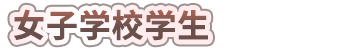
<style>
.page{position:relative;width:360px;height:50px;background:#ffffff}
.page>*{position:absolute;margin:0}
.t1{font:32px "SourceHanSansSC-Bold";font-weight:bold}
</style>
<div class="page">
<p class="t1" style="left:14px;top:9px;width:194px;height:32px">女子学校学生</p>
</div>
